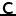
<style>
.page{position:relative;width:16px;height:16px;background:#ffffff}
.page>*{position:absolute;margin:0}
.t1{font:23px "Muli";color:#000000}
</style>
<div class="page">
<p class="t1" style="left:2px;top:2px;width:11px;height:12px">c</p>
</div>
